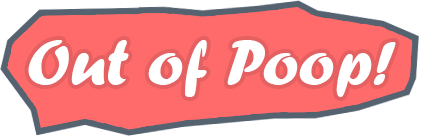
<style>
.page{position:relative;width:423px;height:137px;background:#ff6b6b}
.page>*{position:absolute;margin:0}
.t1{font:67.4px "ForteMT";color:#ffffff}
</style>
<div class="page">
<p class="t1" style="left:28px;top:40px;width:368px;height:57px">Out of Poop!</p>
</div>
